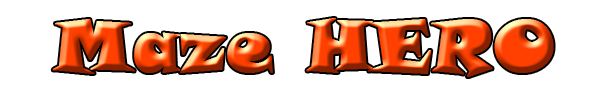
<style>
.page{position:relative;width:600px;height:100px;background:#ffffff}
.page>*{position:absolute;margin:0}
.t1{font:72px "SnapITC-Regular";font-weight:bold}
</style>
<div class="page">
<p class="t1" style="left:52px;top:18px;width:502px;height:59px">Maze HERO</p>
</div>
